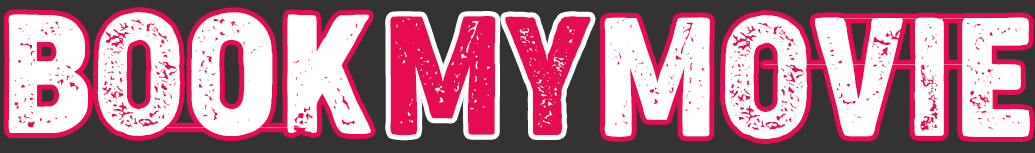
<style>
.page{position:relative;width:1035px;height:153px;background:#ffffff}
.page>*{position:absolute;margin:0}
.t1{font:158.8px "CocogooseCondensed-Letterpress";color:#ffffff}
.t2{font:158.8px "CocogooseCondensed-Letterpress";color:#e50c51}
</style>
<div class="page">
<p class="t1" style="left:8px;top:12px;width:363px;height:124px">BOOK</p>
<p class="t2" style="left:390px;top:16px;width:201px;height:120px">MY</p>
<p class="t1" style="left:604px;top:15px;width:426px;height:124px">MOVIE</p>
</div>
